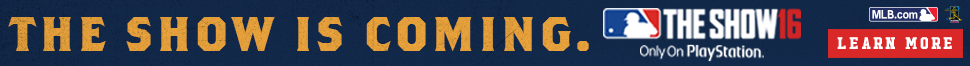
<style>
.page{position:relative;width:970px;height:66px}
.page>*{position:absolute;margin:0}
.t1{font:48.5px "BrothersBold";letter-spacing:0.08em;color:#e29e3a}
.t2{font:16.8px "HudsonNY-Slab";letter-spacing:0.15em;color:#ffffff}
</style>
<div class="page">
<p class="t1" style="left:8px;top:17px;width:581px;height:34px">THE SHOW IS COMING.</p>
<p class="t2" style="left:837px;top:37px;width:115px;height:12px">LEARN MORE</p>
</div>
